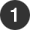
<style>
.page{position:relative;width:30px;height:30px;background:#333333}
.page>*{position:absolute;margin:0}
.t1{font:18.4px "Swiss721BT-BoldCondensed";color:#ffffff;scale:1.03 1}
</style>
<div class="page">
<p class="t1" style="left:10px;top:7px;width:7px;height:15px">1</p>
</div>
